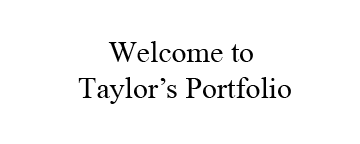
<style>
.page{position:relative;width:360px;height:144px;background:#ffffff}
.page>*{position:absolute;margin:0}
.t1{font:30px "MongolianBaiti";color:#000000}
</style>
<div class="page">
<p class="t1" style="left:78px;top:41px;width:213px;height:63px;text-align:center">Welcome to <br>Taylor’s Portfolio</p>
</div>
